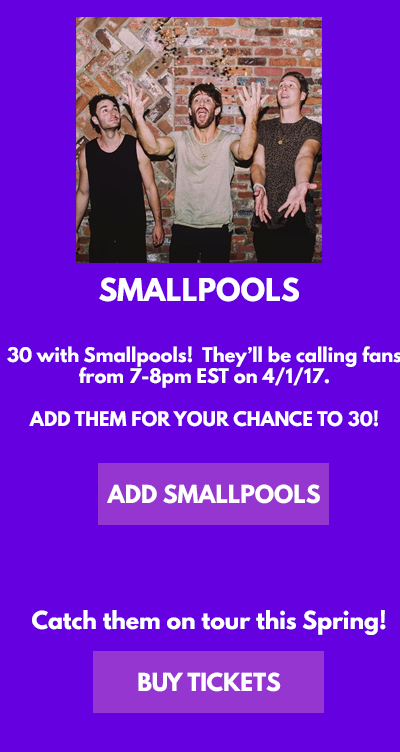
<style>
.page{position:relative;width:400px;height:752px;background:#6500e1}
.page>*{position:absolute;margin:0}
.t1{font:28px "LeagueSpartan-Bold";color:#ffffff}
.t2{font:18px "LeagueSpartan-Bold";color:#ffffff}
.t3{font:21.9px "LeagueSpartan-Bold";color:#ffffff}
</style>
<div class="page">
<p class="t1" style="left:99px;top:277px;width:200px;height:25px">SMALLPOOLS</p>
<p class="t2" style="left:7px;top:346px;width:395px;height:81px;text-align:center">30 with Smallpools!  They’ll be calling fans<br>from 7-8pm EST on 4/1/17.<br><br>ADD THEM FOR YOUR CHANCE TO 30!</p>
<p class="t3" style="left:107px;top:484px;width:213px;height:20px">ADD SMALLPOOLS</p>
<p class="t3" style="left:32px;top:610px;width:354px;height:25px">Catch them on tour this Spring!</p>
<p class="t3" style="left:138px;top:672px;width:143px;height:20px">BUY TICKETS</p>
</div>
